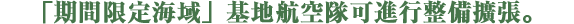
<style>
.page{position:relative;width:574px;height:24px;background:#ffffff}
.page>*{position:absolute;margin:0}
.t1{font:24px "RyuminPr6N-ExBold";color:#46754a;font-weight:bold}
</style>
<div class="page">
<p class="t1" style="left:43px;top:0px;width:489px;height:24px">「期間限定海域」基地航空隊可進行整備擴張。</p>
</div>
